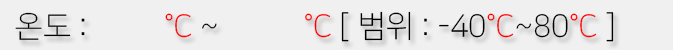
<style>
.page{position:relative;width:673px;height:50px;background:#f0f0f0}
.page>*{position:absolute;margin:0}
.t1{font:31px "NanumSquareL";color:#000000}
.t2{font:31px "NanumSquareL";color:#ff0000}
</style>
<div class="page">
<p class="t1" style="left:15px;top:11px;width:599px;height:31px">온도 :<span class="t2">          °C </span>~<span class="t2">           °C </span>[ 범위 : -40<span class="t2">°C</span>~80<span class="t2">°C </span>]</p>
</div>
